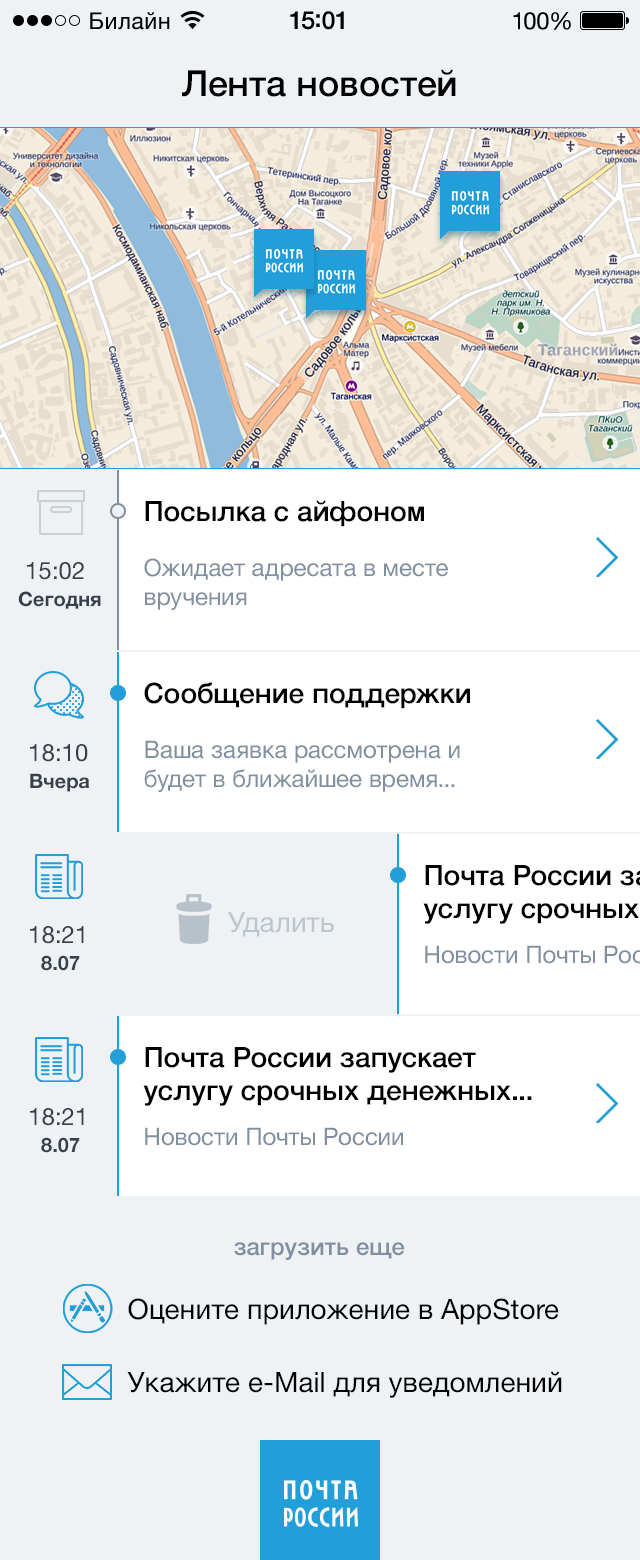
<style>
.page{position:relative;width:640px;height:1560px;background:#eff2f4}
.page>*{position:absolute;margin:0}
.t1{font:36px "HelveticaNeue-Medium";color:#000000}
.t2{font:28px "HelveticaNeue-Medium";color:#000000}
.t3{font:24px "HelveticaNeue";color:#8190a0}
.t4{font:24px "HelveticaNeue";color:#38414b}
.t5{font:20px "HelveticaNeue-Bold";color:#38414b}
.t6{font:28px "HelveticaNeue";color:#bdc5cd}
.t7{font:24px "HelveticaNeue-Medium";color:#8190a0}
.t8{font:28px "HelveticaNeue";color:#000000}
</style>
<div class="page">
<p class="t1" style="left:182px;top:69px;width:274px;height:28px">Лента новостей</p>
<p class="t2" style="left:145px;top:500px;width:279px;height:27px">Посылка с айфоном</p>
<p class="t3" style="left:144px;top:558px;width:304px;height:52px">Ожидает адресата в месте<br>вручения</p>
<p class="t4" style="left:27px;top:562px;width:57px;height:18px">15:02</p>
<p class="t5" style="left:18px;top:591px;width:83px;height:18px">Сегодня</p>
<p class="t2" style="left:144px;top:682px;width:326px;height:27px">Сообщение поддержки</p>
<p class="t4" style="left:30px;top:744px;width:58px;height:18px">18:10</p>
<p class="t3" style="left:144px;top:740px;width:316px;height:52px">Ваша заявка рассмотрена и<br>будет в ближайшее время...</p>
<p class="t5" style="left:30px;top:773px;width:59px;height:19px">Вчера</p>
<p class="t6" style="left:228px;top:912px;width:106px;height:25px">Удалить</p>
<p class="t4" style="left:30px;top:926px;width:54px;height:18px">18:21</p>
<p class="t5" style="left:41px;top:955px;width:39px;height:16px">8.07</p>
<p class="t2" style="left:143px;top:1047px;width:389px;height:59px">Почта России запускает <br>услугу срочных денежных...</p>
<p class="t4" style="left:30px;top:1108px;width:54px;height:18px">18:21</p>
<p class="t3" style="left:145px;top:1127px;width:258px;height:19px">Новости Почты России</p>
<p class="t5" style="left:41px;top:1137px;width:39px;height:16px">8.07</p>
<p class="t7" style="left:234px;top:1242px;width:171px;height:18px">загрузить еще</p>
<p class="t8" style="left:128px;top:1298px;width:431px;height:27px">Оцените приложение в AppStore</p>
<p class="t8" style="left:127px;top:1371px;width:435px;height:27px">Укажите e-Mail для уведомлений</p>
</div>
